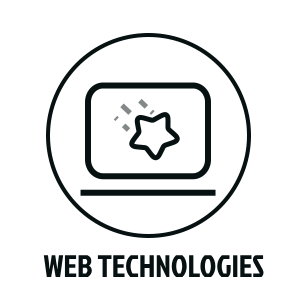
<style>
.page{position:relative;width:300px;height:300px;background:#ffffff}
.page>*{position:absolute;margin:0}
.t1{font:31px "JockeyOne-Regular";color:#081112}
</style>
<div class="page">
<p class="t1" style="left:43px;top:255px;width:221px;height:22px">WEB TECHNOLOGIES</p>
</div>
